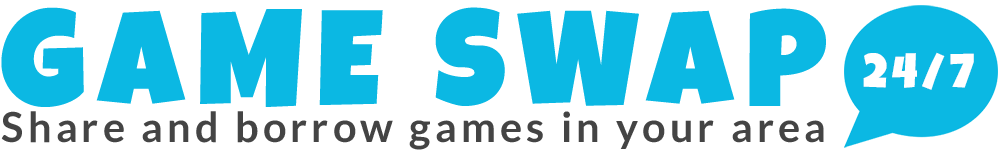
<style>
.page{position:relative;width:1000px;height:150px;background:#ffffff}
.page>*{position:absolute;margin:0}
.t1{font:134.4px "LuckiestGuy-Regular";letter-spacing:0.1em;color:#0bb8e3;text-transform:uppercase}
.t2{font:48px "LuckiestGuy-Regular";letter-spacing:0.1em;color:#ffffff;text-transform:uppercase}
.t3{font:41.1px "Lato-Bold";letter-spacing:0.1em;color:#444444}
</style>
<div class="page">
<p class="t1" style="left:1px;top:7px;width:825px;height:100px">game swap</p>
<p class="t2" style="left:863px;top:52px;width:111px;height:38px">24/7</p>
<p class="t3" style="left:1px;top:111px;width:823px;height:39px">Share and borrow games in your area</p>
</div>
